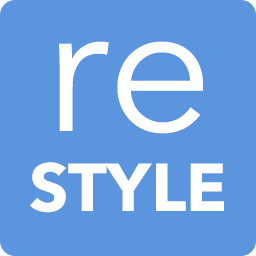
<style>
.page{position:relative;width:256px;height:256px;background:#5a95dd}
.page>*{position:absolute;margin:0}
.t1{font:67px "AvenirNext-Bold";color:#ffffff}
.t2{font:186px "AvenirNext-Regular";color:#ffffff}
</style>
<div class="page">
<p class="t1" style="left:30px;top:41px;width:194px;height:172px;text-align:center"><span class="t2">re<br></span>STYLE</p>
</div>
